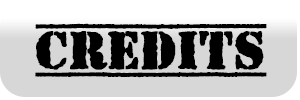
<style>
.page{position:relative;width:300px;height:100px;background:#d7d7d7}
.page>*{position:absolute;margin:0}
.t1{font:54.2px "TopSecret";letter-spacing:-0.02em;color:#000000;text-transform:uppercase;font-weight:bold}
</style>
<div class="page">
<p class="t1" style="left:35px;top:23px;width:232px;height:55px">credits</p>
</div>
